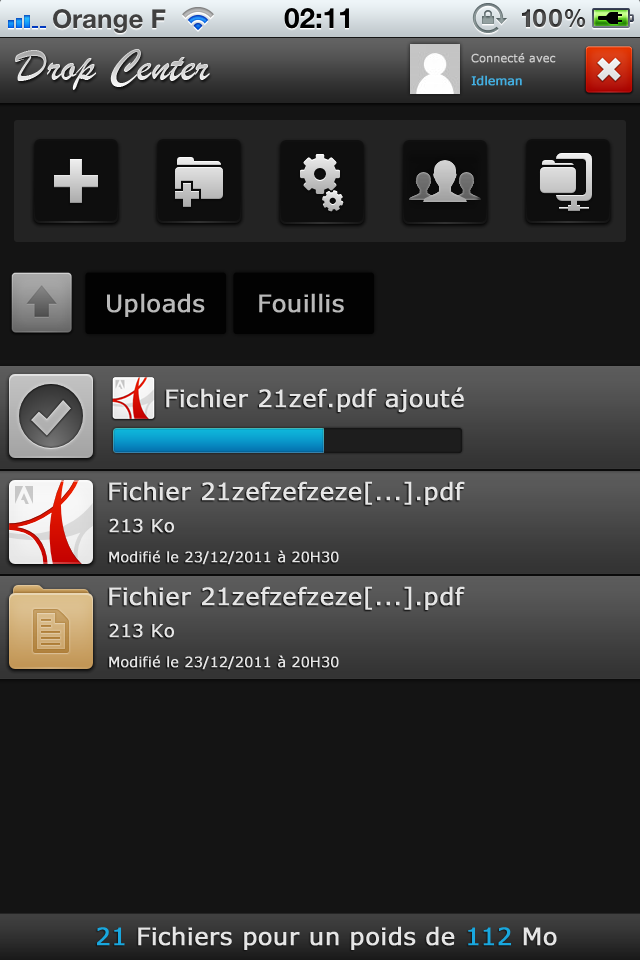
<style>
.page{position:relative;width:640px;height:960px;background:#141414}
.page>*{position:absolute;margin:0}
.t1{font:11px "Verdana";color:#cfcfcf;font-weight:bold}
.t2{font:12px "Verdana";color:#43afe1;font-weight:bold}
.t3{font:24px "Verdana";color:#b9b9b9;font-weight:bold}
.t4{font:24px "Verdana";color:#e5e5e5;font-weight:bold}
.t5{font:18px "Verdana";color:#e5e5e5;font-weight:bold}
.t6{font:14px "Verdana";color:#e5e5e5;font-weight:bold}
.t7{font:24px "Verdana";color:#19a7de;font-weight:bold}
</style>
<div class="page">
<p class="t1" style="left:471px;top:53px;width:85px;height:10px">Connecté avec</p>
<p class="t2" style="left:471px;top:75px;width:51px;height:11px">Idleman</p>
<p class="t3" style="left:107px;top:293px;width:98px;height:24px">Uploads</p>
<p class="t3" style="left:259px;top:293px;width:85px;height:20px">Fouillis</p>
<p class="t4" style="left:166px;top:387px;width:298px;height:26px">Fichier 21zef.pdf ajouté</p>
<p class="t4" style="left:109px;top:481px;width:356px;height:24px">Fichier 21zefzefzeze[...].pdf</p>
<p class="t5" style="left:109px;top:518px;width:65px;height:15px">213 Ko</p>
<p class="t6" style="left:109px;top:550px;width:230px;height:15px">Modifié le 23/12/2011 à 20H30</p>
<p class="t4" style="left:109px;top:586px;width:356px;height:24px">Fichier 21zefzefzeze[...].pdf</p>
<p class="t5" style="left:109px;top:623px;width:65px;height:15px">213 Ko</p>
<p class="t6" style="left:109px;top:655px;width:230px;height:15px">Modifié le 23/12/2011 à 20H30</p>
<p class="t4" style="left:97px;top:926px;width:460px;height:24px"><span class="t7">21</span> Fichiers pour un poids de <span class="t7">112 </span>Mo</p>
</div>
